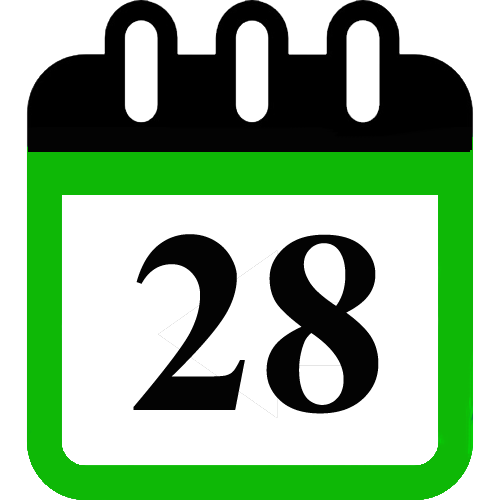
<style>
.page{position:relative;width:500px;height:500px;background:#ffffff}
.page>*{position:absolute;margin:0}
.t1{font:260px "TimesNewRomanPS-BoldMT";color:#030303}
</style>
<div class="page">
<p class="t1" style="left:133px;top:234px;width:246px;height:180px">28</p>
</div>
